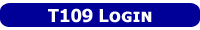
<style>
.page{position:relative;width:200px;height:30px;background:#000099}
.page>*{position:absolute;margin:0}
.t1{font:17.9px "TahomaSmallCap-Bold";color:#ffffff}
</style>
<div class="page">
<p class="t1" style="left:48px;top:8px;width:104px;height:15px">T109 Login</p>
</div>
